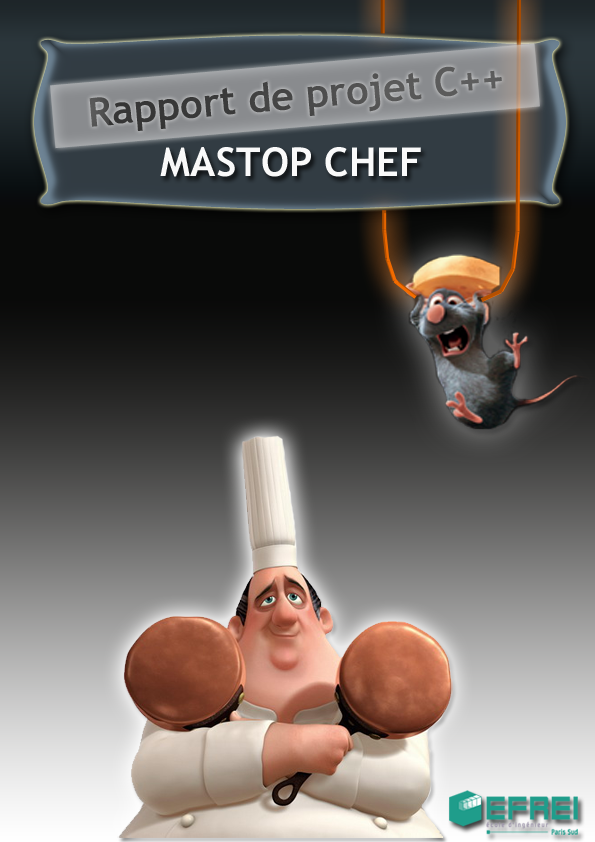
<style>
.page{position:relative;width:595px;height:842px}
.page>*{position:absolute;margin:0}
.t1{font:40px "TrebuchetMS-Bold";color:#494949}
.t2{font:40px "TrebuchetMS-Bold";color:#ededed}
</style>
<div class="page">
<p class="t1" style="left:89px;top:66px;width:413px;height:65px;rotate:-5deg">Rapport de projet C++</p>
<p class="t2" style="left:160px;top:147px;width:261px;height:30px">MASTOP CHEF</p>
</div>
